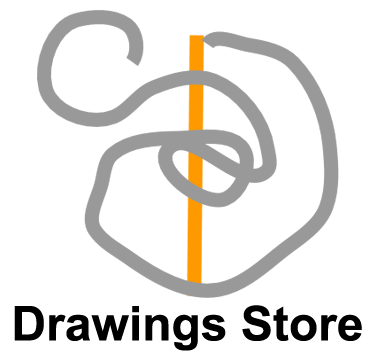
<style>
.page{position:relative;width:375px;height:357px;background:#ffffff}
.page>*{position:absolute;margin:0}
.t1{font:48px "Arial-BoldMT";color:#000000}
</style>
<div class="page">
<p class="t1" style="left:14px;top:305px;width:348px;height:46px">Drawings Store</p>
</div>
